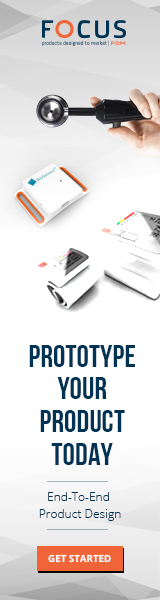
<style>
.page{position:relative;width:160px;height:600px;background:#ffffff}
.page>*{position:absolute;margin:0}
.t1{font:31.3px/32.7px "BebasNeueBold";color:#003354;text-transform:uppercase}
.t2{font:12px/17px "OpenSans-Light";color:#003354}
.t3{font:9.7px "OpenSans-Bold";color:#ffffff}
</style>
<div class="page">
<p class="t1" style="left:29px;top:345px;width:106px;height:120px;text-align:center">prototype<br>your<br>product<br>today</p>
<p class="t2" style="left:39px;top:492px;width:82px;height:29px;text-align:center">End-To-End <br>Product Design</p>
<p class="t3" style="left:48px;top:554px;width:63px;height:9px">GET STARTED</p>
</div>
